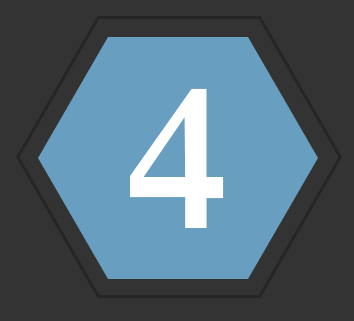
<style>
.page{position:relative;width:354px;height:321px;background:#333333}
.page>*{position:absolute;margin:0}
.t1{font:280px "Rod";color:#ffffff}
</style>
<div class="page">
<p class="t1" style="left:130px;top:88px;width:94px;height:140px">4</p>
</div>
